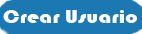
<style>
.page{position:relative;width:142px;height:34px;background:#1b78b3}
.page>*{position:absolute;margin:0}
.t1{font:18.6px "Bauhaus93";color:#ffffff;scale:1.2 1}
</style>
<div class="page">
<p class="t1" style="left:3px;top:10px;width:134px;height:13px">Crear Usuario</p>
</div>
